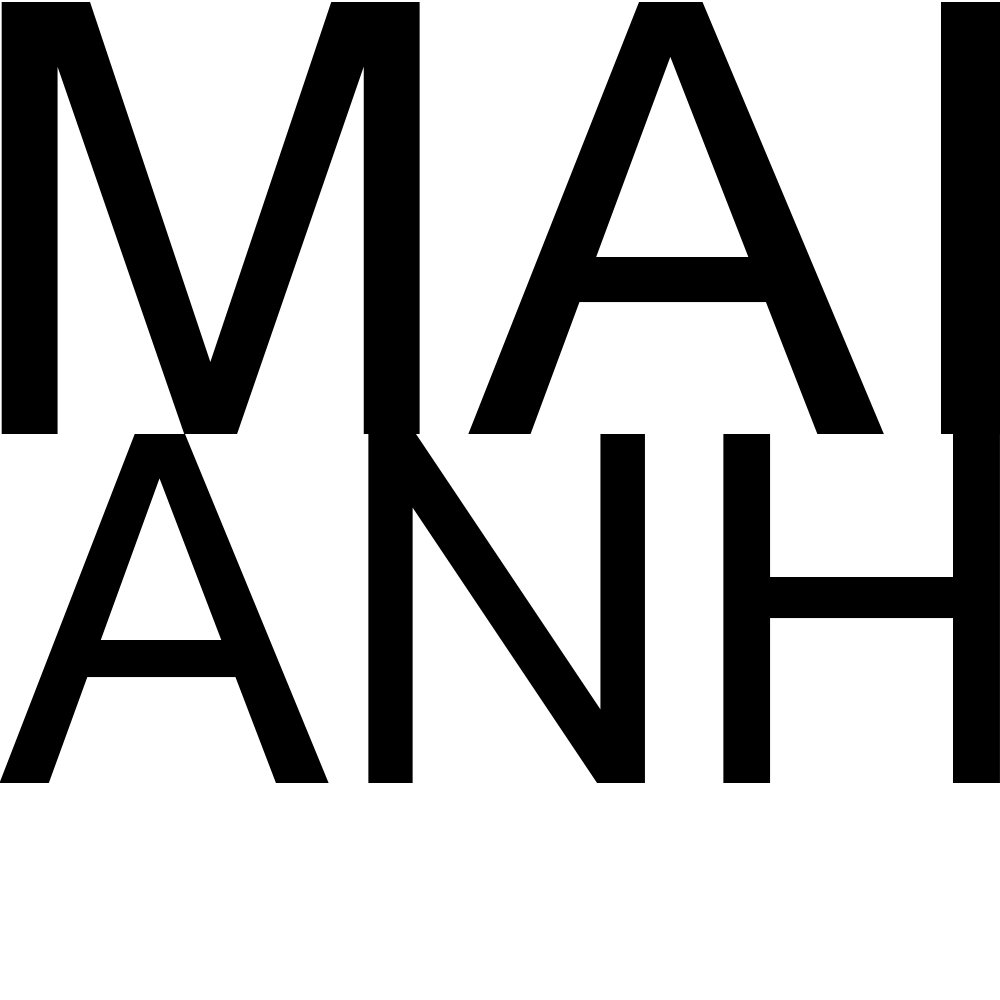
<style>
.page{position:relative;width:1000px;height:1000px;background:#ffffff}
.page>*{position:absolute;margin:0}
.t1{font:604.2px "MicrosoftSansSerif";color:#000000}
.t2{font:486.6px "MicrosoftSansSerif";color:#000000}
</style>
<div class="page">
<p class="t1" style="left:1px;top:2px;width:1000px;height:432px">MAI</p>
<p class="t2" style="left:0px;top:434px;width:1000px;height:349px">ANH</p>
</div>
